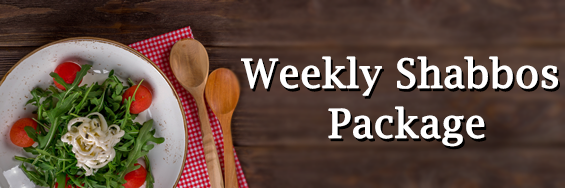
<style>
.page{position:relative;width:565px;height:188px}
.page>*{position:absolute;margin:0}
.t1{font:39.3px/50px "LucidaBright";color:#ffffff;font-weight:bold}
</style>
<div class="page">
<p class="t1" style="left:241px;top:56px;width:317px;height:91px;text-align:center">Weekly Shabbos<br> Package</p>
</div>
